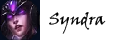
<style>
.page{position:relative;width:140px;height:40px;background:#ffffff}
.page>*{position:absolute;margin:0}
.t1{font:16px "VinerHandITC";color:#000000}
</style>
<div class="page">
<p class="t1" style="left:49px;top:12px;width:57px;height:22px">Syndra</p>
</div>
